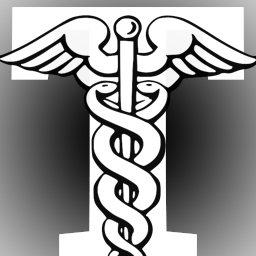
<style>
.page{position:relative;width:256px;height:256px;background:#ffffff}
.page>*{position:absolute;margin:0}
.t1{font:383.3px "SourceSerif4Roman-Black";color:#ffffff}
</style>
<div class="page">
<p class="t1" style="left:11px;top:7px;width:233px;height:250px">T</p>
</div>
